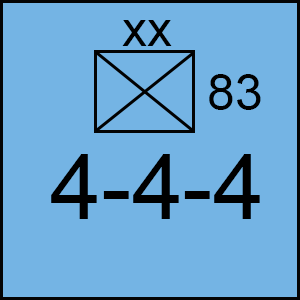
<style>
.page{position:relative;width:300px;height:300px;background:#74b4e4}
.page>*{position:absolute;margin:0}
.t1{font:50px "ArialMT";color:#000000}
.t2{font:91.7px "ArialMT";color:#000000}
</style>
<div class="page">
<p class="t1" style="left:122px;top:20px;width:50px;height:26px">xx</p>
<p class="t1" style="left:209px;top:74px;width:52px;height:36px">83</p>
<p class="t2" style="left:51px;top:154px;width:209px;height:65px">4-4-4</p>
</div>
